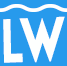
<style>
.page{position:relative;width:67px;height:66px;background:#279aec}
.page>*{position:absolute;margin:0}
.t1{font:61px "Lovelo-Black";letter-spacing:-0.1em;color:#fefffe;scale:0.83 1}
</style>
<div class="page">
<p class="t1" style="left:3px;top:16px;width:62px;height:47px;rotate:-2deg">LW</p>
</div>
